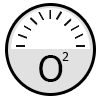
<style>
.page{position:relative;width:100px;height:100px;background:#ffffff}
.page>*{position:absolute;margin:0}
.t1{font:12px "Tahoma";color:#000000}
.t2{font:36px "Tahoma";color:#000000}
</style>
<div class="page">
<p class="t1" style="left:62px;top:52px;width:7px;height:9px">2</p>
<p class="t2" style="left:39px;top:55px;width:24px;height:27px">O</p>
</div>
